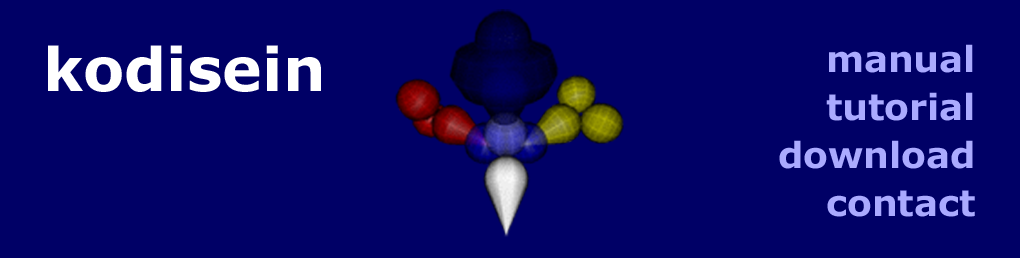
<style>
.page{position:relative;width:1020px;height:258px;background:#000066}
.page>*{position:absolute;margin:0}
.t1{font:60px "Verdana-Bold";color:#ffffff}
.t2{font:36px/48px "Verdana-Bold";color:#aaaaff}
</style>
<div class="page">
<p class="t1" style="left:48px;top:45px;width:273px;height:47px">kodisein</p>
<p class="t2" style="left:779px;top:44px;width:196px;height:173px;text-align:right">manual<br>tutorial<br>download<br>contact</p>
</div>
